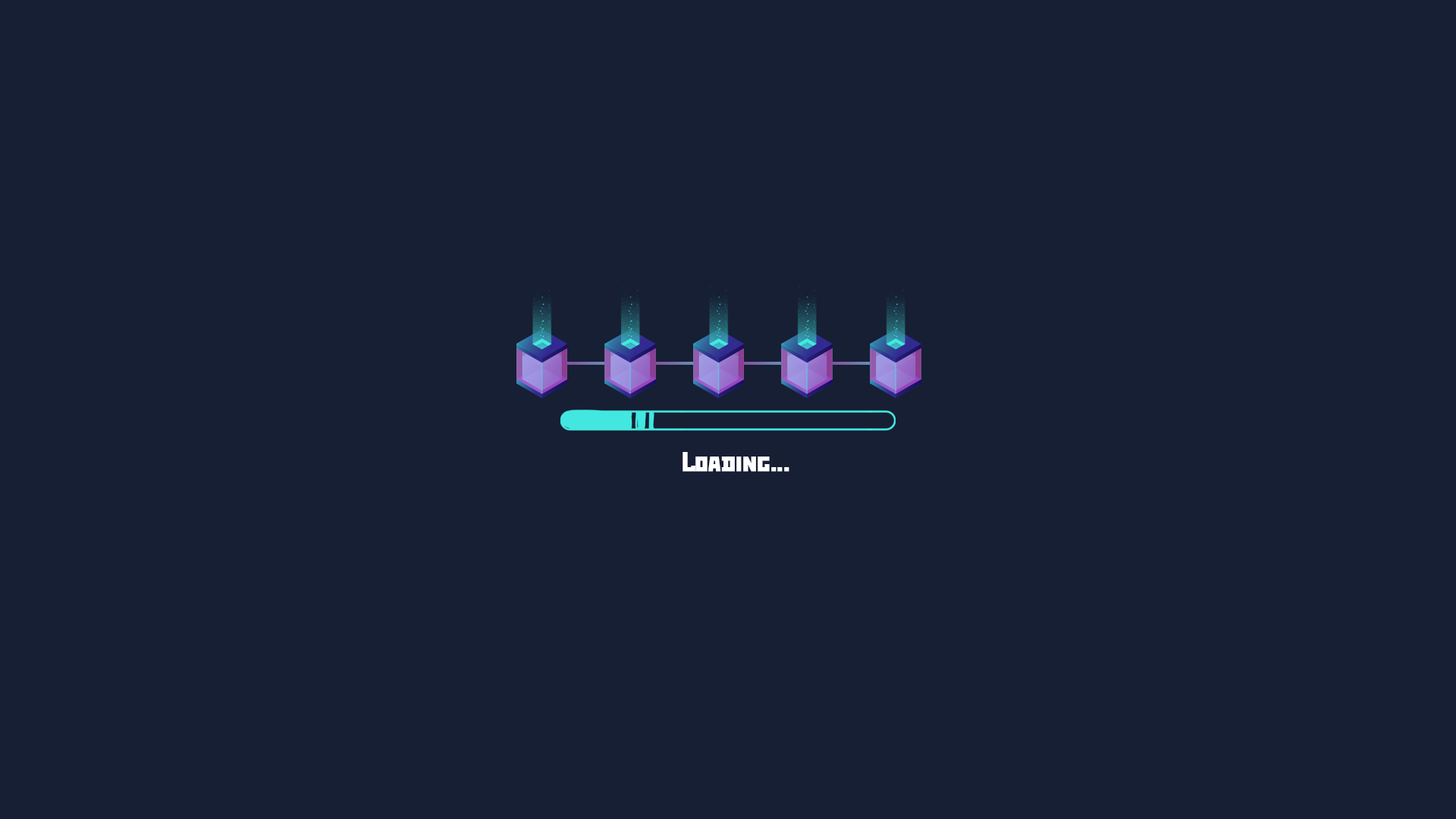
<style>
.page{position:relative;width:1456px;height:819px;background:#161f34}
.page>*{position:absolute;margin:0}
.t1{font:26.7px "RodchenkoC";color:#ffffff;font-weight:bold}
</style>
<div class="page">
<p class="t1" style="left:682px;top:452px;width:107px;height:20px">Loading...</p>
</div>
